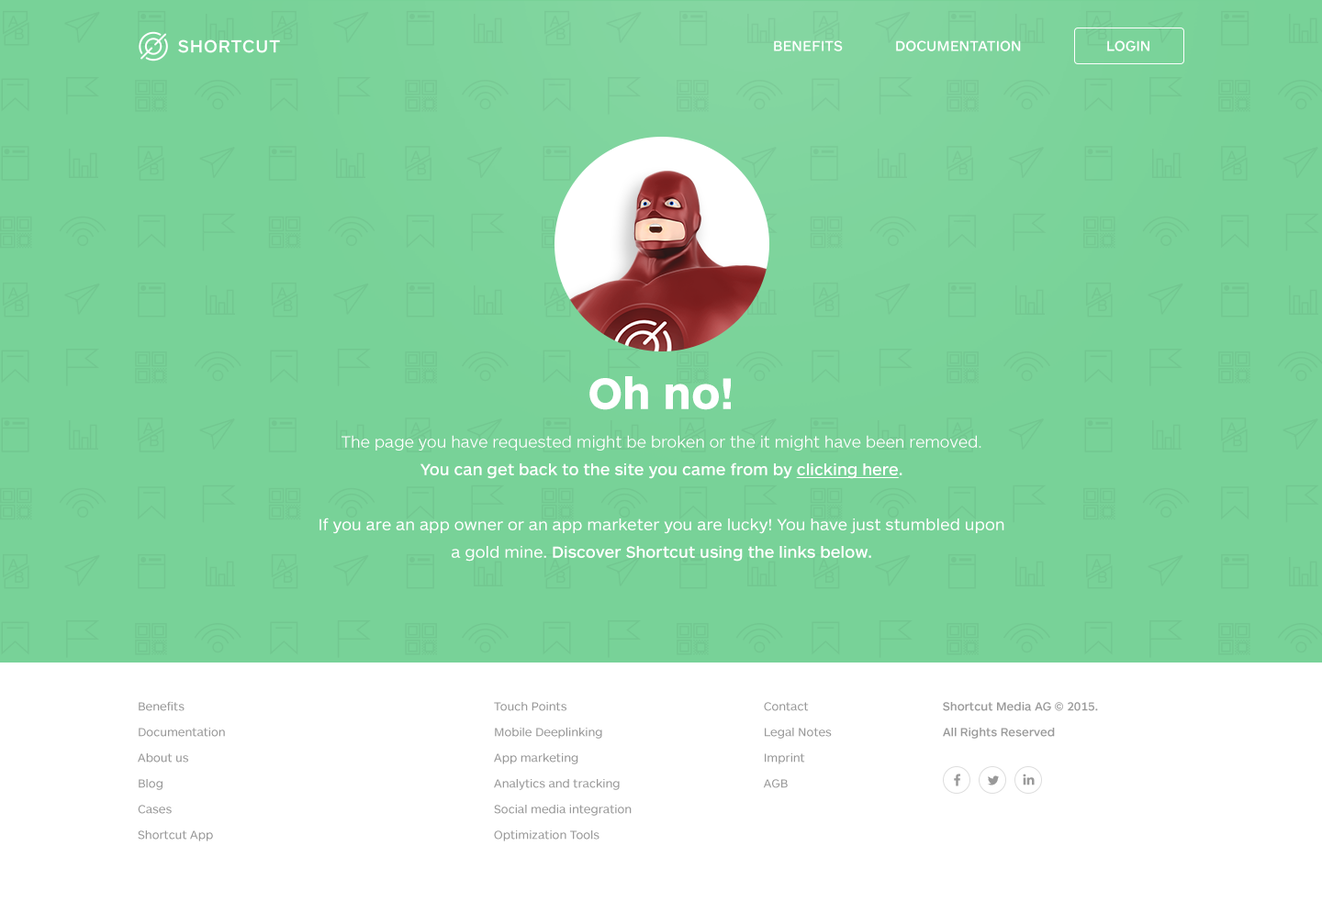
<style>
.page{position:relative;width:1322px;height:902px;background:#78d298}
.page>*{position:absolute;margin:0}
.t1{font:45.9px "ARSMaquettePro-Bold";color:#ffffff}
.t2{font:16.5px/27.5px "ARSMaquettePro-Regular";color:#ffffff}
.t3{font:16.5px/27.5px "ARSMaquettePro-Light";color:#ffffff}
.t4{font:16.5px/27.5px "ARSMaquettePro-Medium";color:#ffffff}
.t5{font:16.5px/27.5px "ARSMaquettePro-Medium";color:#ffffff;text-decoration:underline}
</style>
<div class="page">
<p class="t1" style="left:589px;top:376px;width:142px;height:34px">Oh no!</p>
<p class="t2" style="left:319px;top:435px;width:685px;height:127px;text-align:center"><span class="t3">The page you have requested might be broken or the it might have been removed. <br></span><span class="t4">You can get back to the site you came from by </span><span class="t5">clicking here</span><span class="t4">.<br><br></span>If you are an app owner or an app marketer you are lucky! You have just stumbled upon a gold mine. <span class="t4">Discover Shortcut using the links below.</span></p>
</div>
